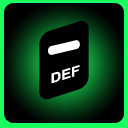
<style>
.page{position:relative;width:128px;height:128px;background:#000000}
.page>*{position:absolute;margin:0}
.t1{font:13.5px "Arial-BoldMT";color:#ffffff;scale:1.14 1}
</style>
<div class="page">
<p class="t1" style="left:51px;top:65px;width:29px;height:19px;rotate:-17deg">DEF</p>
</div>
